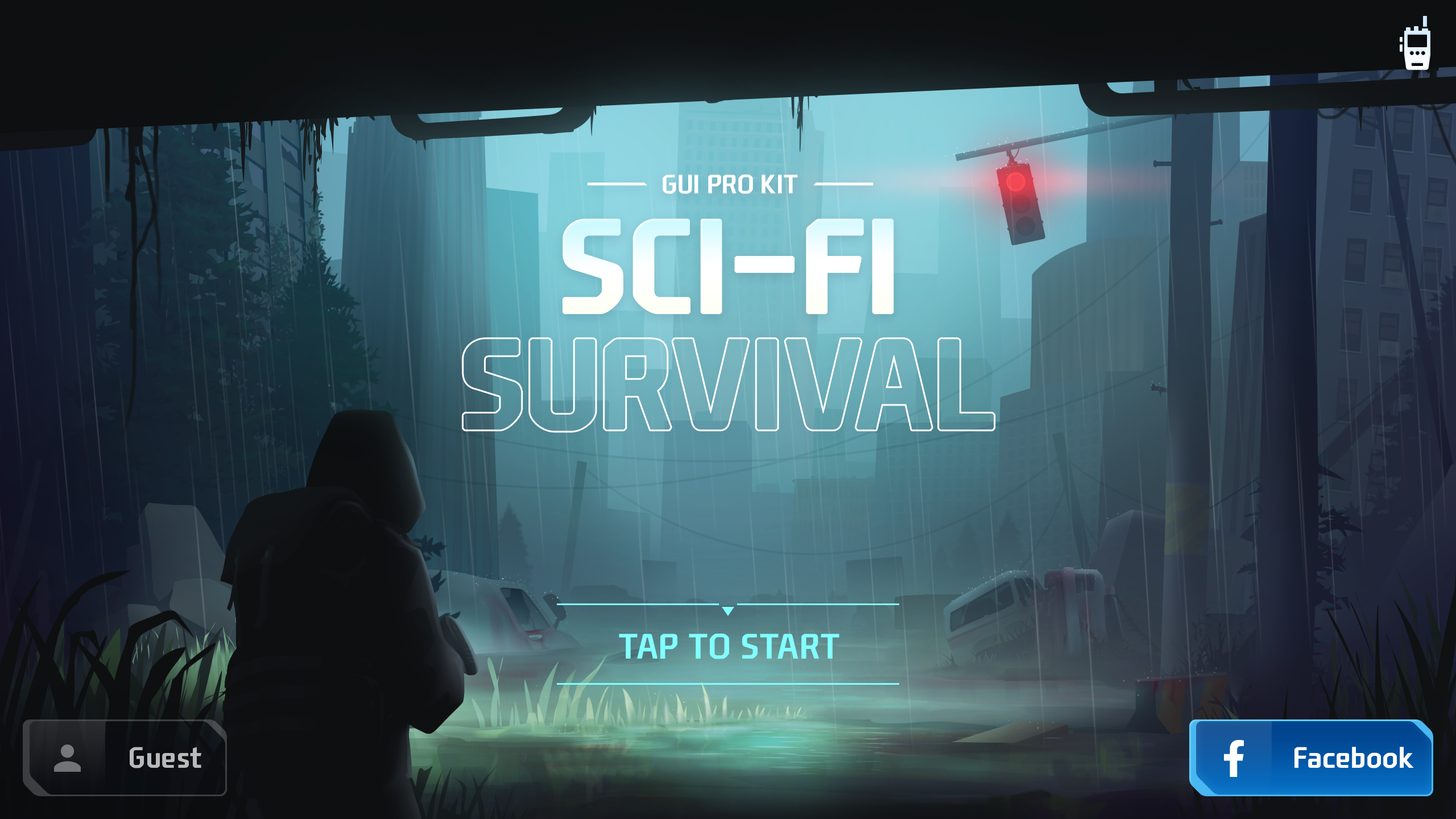
<style>
.page{position:relative;width:1456px;height:819px}
.page>*{position:absolute;margin:0}
.t1{font:25.6px "NEXONFootballGothicB";color:#ffffff;text-transform:uppercase}
.t2{font:34.1px "NEXONFootballGothicB";letter-spacing:0.01em;color:#81fffe}
.t3{font:28.4px "NEXONFootballGothicB";color:#b9b9ba}
.t4{font:28.4px "NEXONFootballGothicB";color:#ffffff}
</style>
<div class="page">
<p class="t1" style="left:663px;top:174px;width:135px;height:20px">GUI PRO KIT</p>
<p class="t2" style="left:619px;top:634px;width:220px;height:25px">TAP TO START</p>
<p class="t3" style="left:130px;top:747px;width:71px;height:21px">Guest</p>
<p class="t4" style="left:1294px;top:747px;width:120px;height:21px">Facebook</p>
</div>
